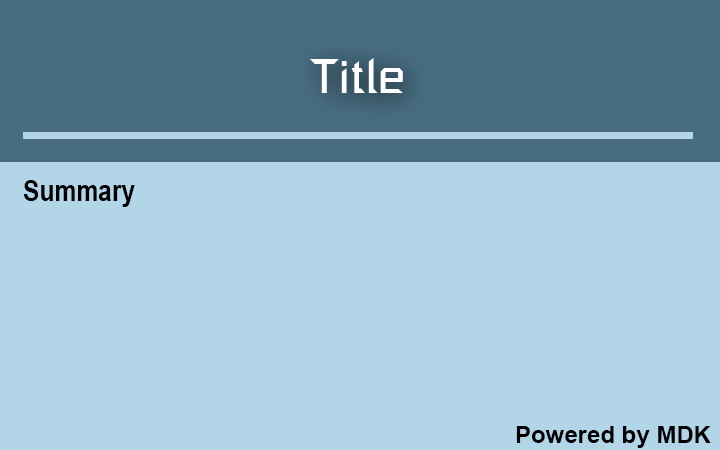
<style>
.page{position:relative;width:720px;height:450px;background:#b2d5e8}
.page>*{position:absolute;margin:0}
.t1{font:48px "SpaceEngineers";color:#ffffff}
.t2{font:30px "ArialNarrow-Bold";color:#000000}
.t3{font:24px "Arial-BoldMT";color:#000000}
</style>
<div class="page">
<p class="t1" style="left:310px;top:58px;width:93px;height:35px">Title</p>
<p class="t2" style="left:23px;top:180px;width:112px;height:27px">Summary</p>
<p class="t3" style="left:516px;top:426px;width:195px;height:22px">Powered by MDK</p>
</div>
